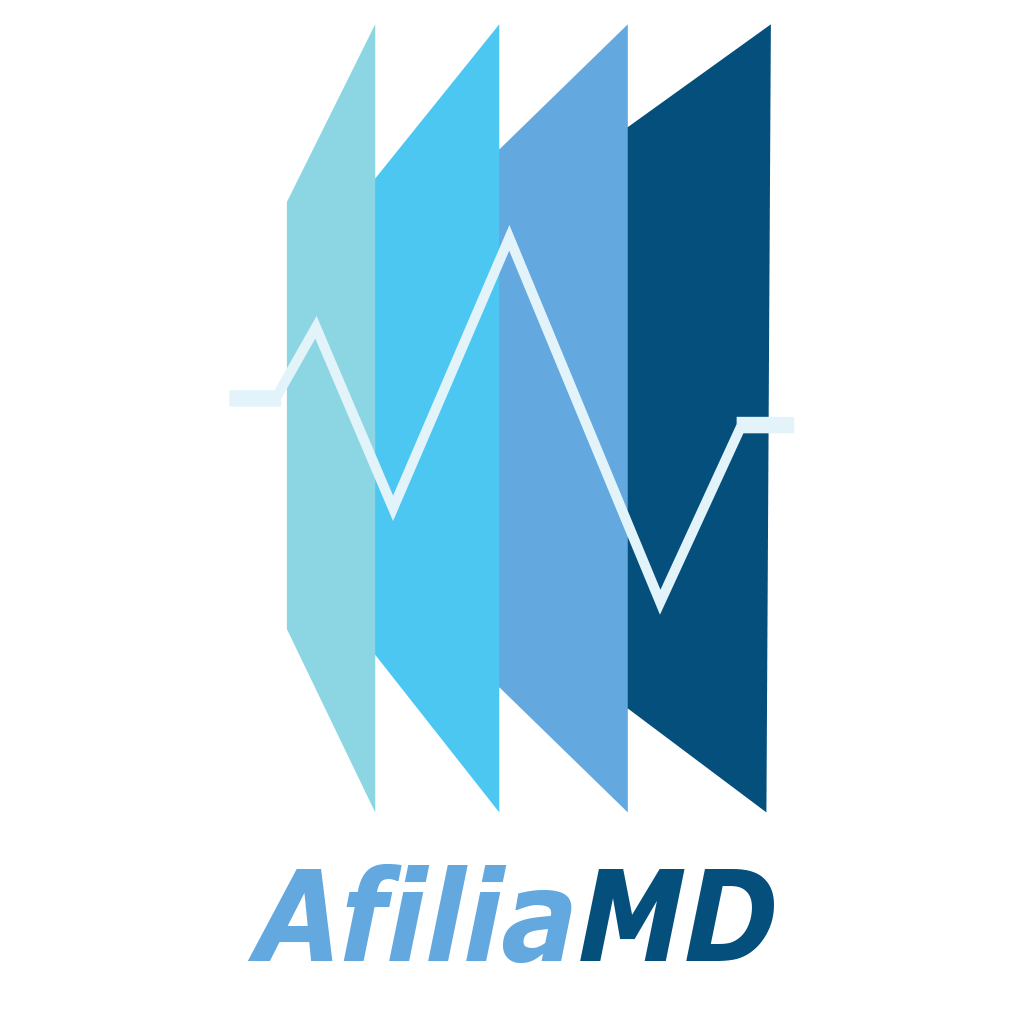
<style>
.page{position:relative;width:1024px;height:1024px;background:#ffffff}
.page>*{position:absolute;margin:0}
.t1{font:127.2px "Verdana-BoldItalic";color:#63a8df;scale:0.88 1}
.t2{font:127.2px "Verdana-BoldItalic";color:#044f7c;scale:0.88 1}
</style>
<div class="page">
<p class="t1" style="left:248px;top:864px;width:324px;height:99px">Afilia</p>
<p class="t2" style="left:580px;top:869px;width:194px;height:92px">MD</p>
</div>
